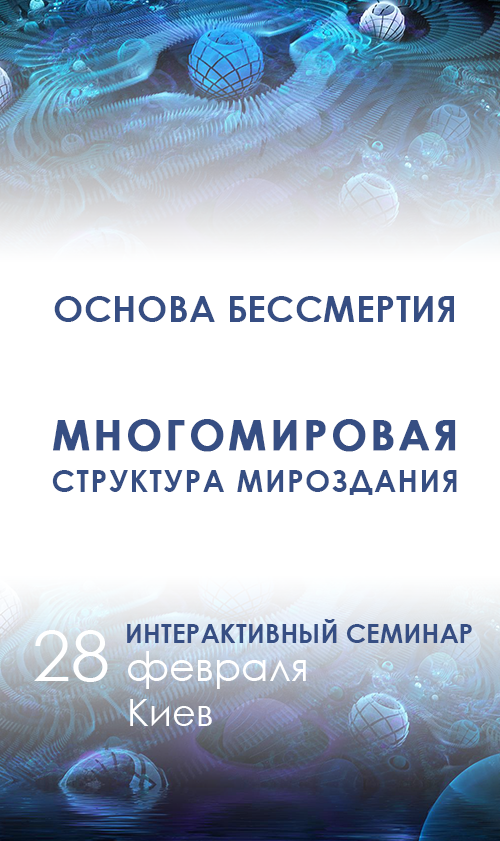
<style>
.page{position:relative;width:500px;height:841px;background:#ffffff}
.page>*{position:absolute;margin:0}
.t1{font:36px "CenturyGothic-Bold";letter-spacing:0.01em;color:#364e83;text-transform:uppercase}
.t2{font:30px/42px "CenturyGothic-Bold";letter-spacing:0.05em;color:#364e83;text-transform:uppercase}
.t3{font:42px/42px "CenturyGothic-Bold";letter-spacing:0.07em;color:#364e83;text-transform:uppercase;font-weight:bold}
.t4{font:40.1px "CenturyGothic";color:#ffffff}
.t5{font:70.3px "CenturyGothic";color:#ffffff}
.t6{font:37.4px "CenturyGothic";color:#ffffff;text-transform:uppercase}
.t7{font:37.4px "CenturyGothic";color:#ffffff}
.t8{font:25.7px "CenturyGothic-Bold";letter-spacing:0.01em;color:#364e83;text-transform:uppercase}
</style>
<div class="page">
<p class="t1" style="left:54px;top:296px;width:400px;height:26px">основа бессмертия</p>
<p class="t2" style="left:52px;top:419px;width:405px;height:76px;text-align:center"><span class="t3">Многомировая<br></span>структура мироздания</p>
<p class="t4" style="left:34px;top:630px;width:272px;height:96px;text-align:center"><span class="t5">28 </span>февраля<br><span class="t6">к</span><span class="t7">иев</span></p>
<p class="t8" style="left:127px;top:619px;width:345px;height:24px">Интерактивный семинар</p>
</div>
